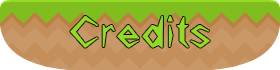
<style>
.page{position:relative;width:280px;height:70px;background:#c58f5c}
.page>*{position:absolute;margin:0}
.t1{font:42.7px "DPCarved";color:#93db24;font-weight:bold}
</style>
<div class="page">
<p class="t1" style="left:70px;top:16px;width:140px;height:32px">Credits</p>
</div>
